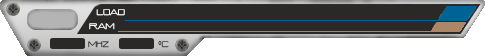
<style>
.page{position:relative;width:486px;height:56px;background:#2b2828}
.page>*{position:absolute;margin:0}
.t1{font:8px "TimeNSpace";color:#ffffff}
.t2{font:8px "TimeNSpace";color:#2b2828}
.t3{font:8px "Corbel-Italic";color:#2b2828}
.t4{font:8px "TimeNSpace"}
</style>
<div class="page">
<p class="t1" style="left:96px;top:9px;width:29px;height:7px">LOAD</p>
<p class="t1" style="left:89px;top:23px;width:26px;height:7px">RAM</p>
<p class="t2" style="left:88px;top:41px;width:21px;height:7px">mhz</p>
<p class="t3" style="left:158px;top:41px;width:4px;height:4px">°</p>
<p class="t4" style="left:161px;top:41px;width:8px;height:7px">c</p>
</div>
